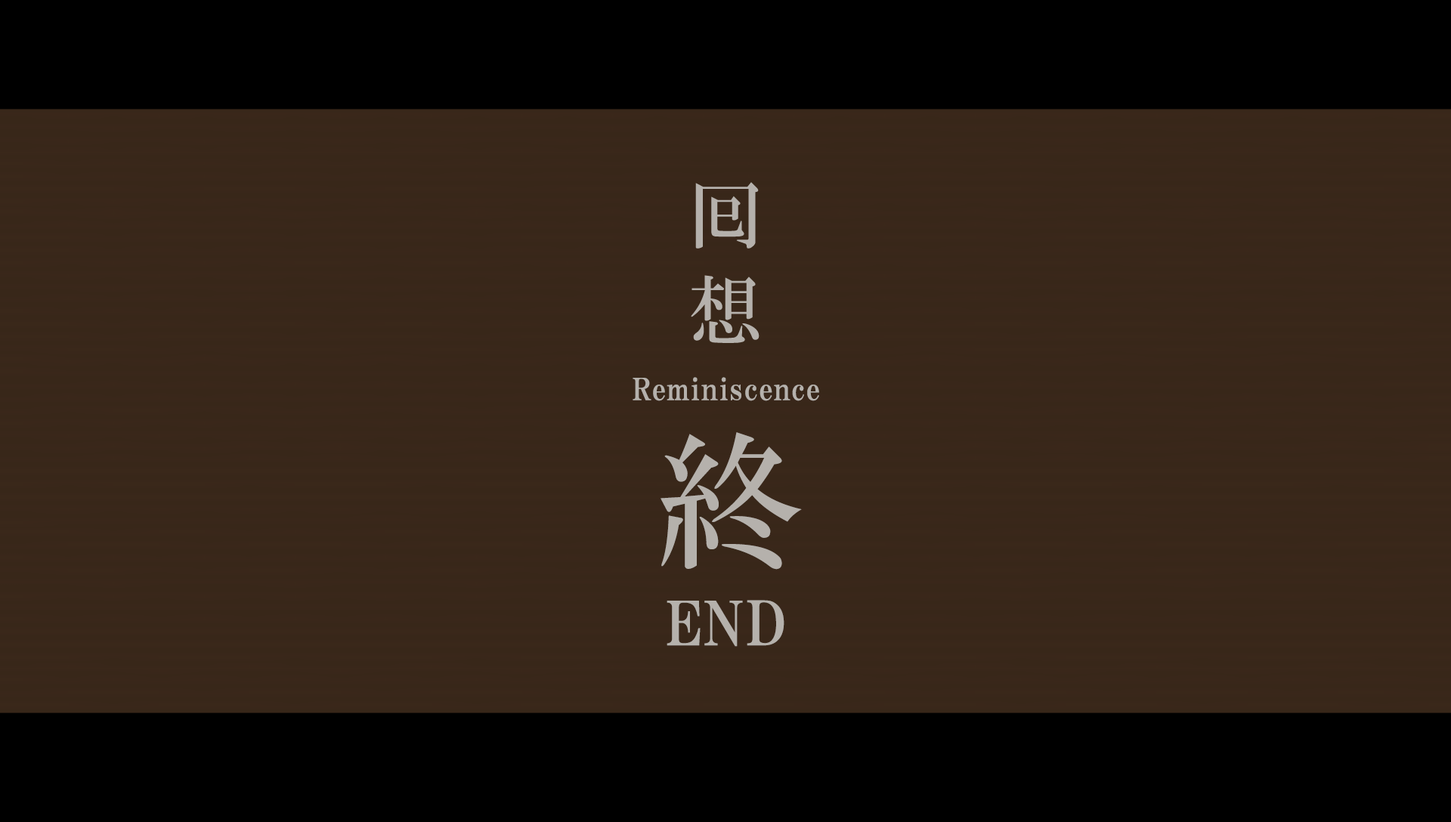
<style>
.page{position:relative;width:1451px;height:822px;background:#39271a}
.page>*{position:absolute;margin:0}
.t1{font:30.2px "HGPMinchoE";letter-spacing:0.025em;color:#b5b1ac}
.t2{font:148.1px "HGMinchoB";letter-spacing:0.51em;color:#b5b1ac}
.t3{font:60.4px "HGPMinchoE";letter-spacing:0.025em;color:#b5b1ac}
</style>
<div class="page">
<p class="t1" style="left:632px;top:377px;width:187px;height:24px">Reminiscence</p>
<p class="t2" style="left:660px;top:432px;width:142px;height:138px">終</p>
<p class="t3" style="left:666px;top:600px;width:118px;height:47px">END</p>
</div>
